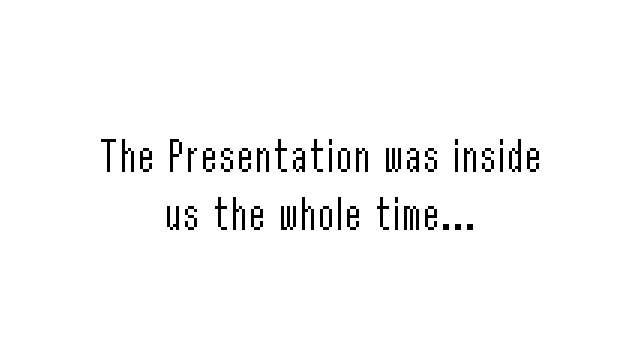
<style>
.page{position:relative;width:640px;height:360px;background:#ffffff}
.page>*{position:absolute;margin:0}
.t1{font:48px "ReturnOfGanonReg";color:#000000}
</style>
<div class="page">
<p class="t1" style="left:101px;top:139px;width:438px;height:91px;text-align:center">The Presentation was inside<br>us the whole time...</p>
</div>
